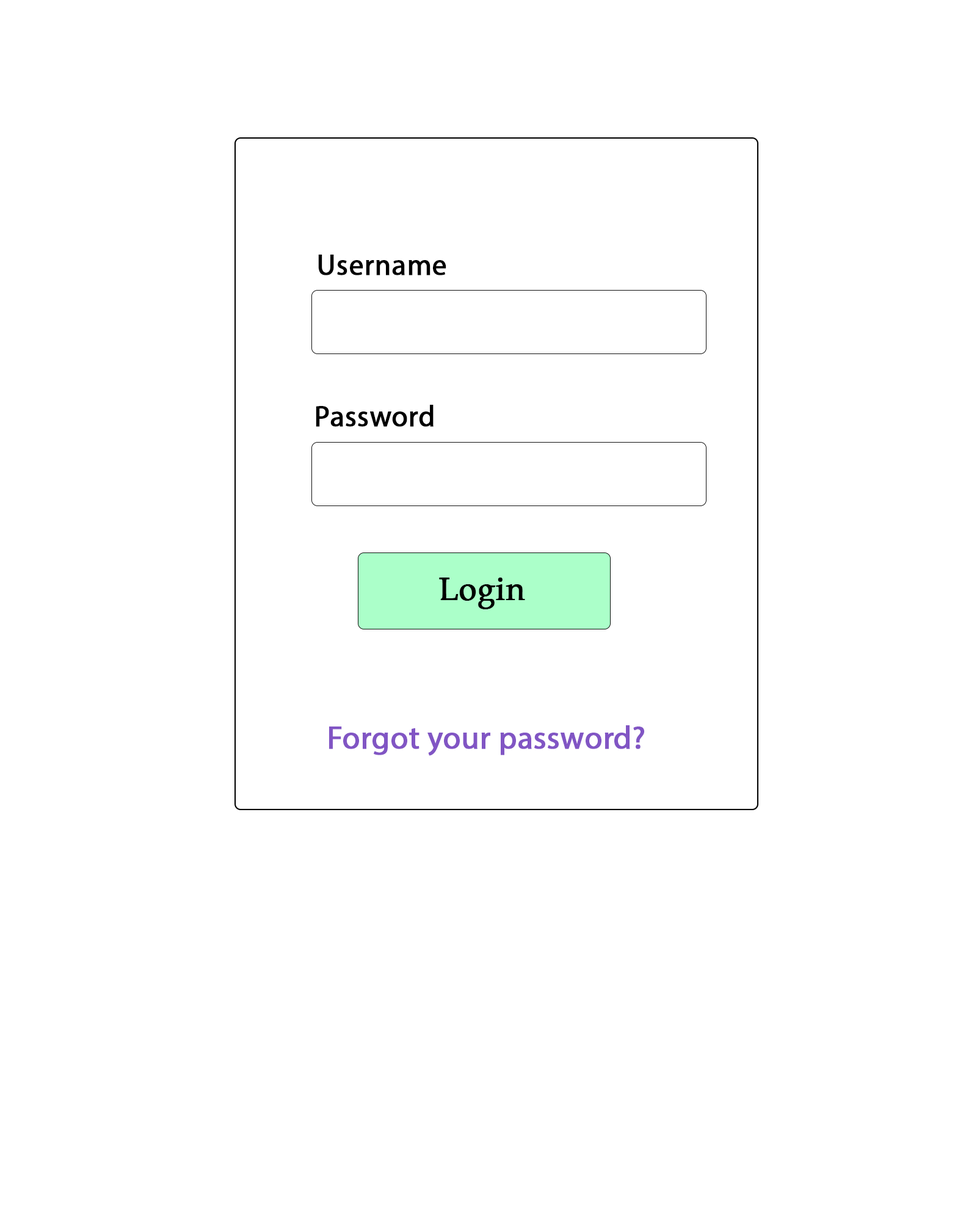
<style>
.page{position:relative;width:977px;height:1221px;background:#ffffff}
.page>*{position:absolute;margin:0}
.t1{font:29.3px "MyriadPro-Regular";color:#000000;font-weight:bold}
.t2{font:31.7px "BookAntiqua";color:#000000;font-weight:bold}
.t3{font:31.7px "MyriadPro-Regular";color:#8155c4;font-weight:bold}
</style>
<div class="page">
<p class="t1" style="left:318px;top:255px;width:128px;height:20px">Username</p>
<p class="t1" style="left:316px;top:405px;width:117px;height:22px">Password</p>
<p class="t2" style="left:439px;top:577px;width:86px;height:32px">Login</p>
<p class="t3" style="left:329px;top:725px;width:315px;height:31px">Forgot your password?</p>
</div>
